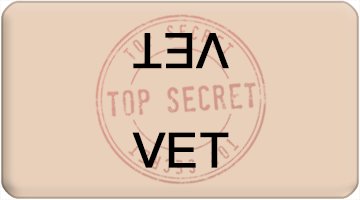
<style>
.page{position:relative;width:360px;height:200px;background:#e8d0bb}
.page>*{position:absolute;margin:0}
.t1{font:48px "ArialMT";color:#000000;font-weight:bold}
</style>
<div class="page">
<p class="t1" style="left:133px;top:33px;width:96px;height:36px;rotate:180deg">VET</p>
<p class="t1" style="left:132px;top:132px;width:97px;height:36px">VET</p>
</div>
